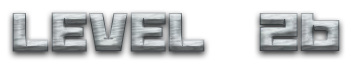
<style>
.page{position:relative;width:364px;height:64px;background:#ffffff}
.page>*{position:absolute;margin:0}
.t1{font:60px "BananaBrick"}
</style>
<div class="page">
<p class="t1" style="left:12px;top:12px;width:328px;height:40px">Level  26</p>
</div>
